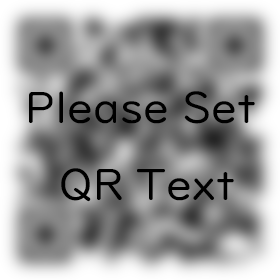
<style>
.page{position:relative;width:280px;height:280px}
.page>*{position:absolute;margin:0}
.t1{font:44px "UDDigiKyokashoNK-R";color:#000000}
</style>
<div class="page">
<p class="t1" style="left:29px;top:91px;width:226px;height:111px;text-align:center">Please Set <br>QR Text</p>
</div>
